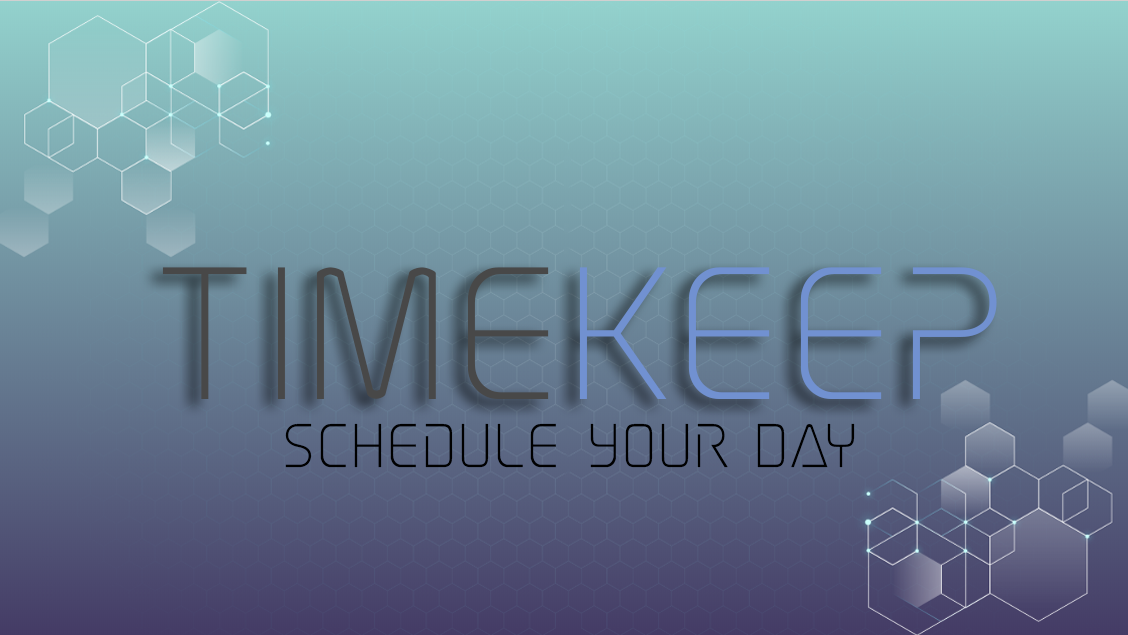
<style>
.page{position:relative;width:1128px;height:635px}
.page>*{position:absolute;margin:0}
.t1{font:80px "EliteDanger";color:#000000}
</style>
<div class="page">
<p class="t1" style="left:285px;top:423px;width:570px;height:45px">Schedule Your Day</p>
</div>
